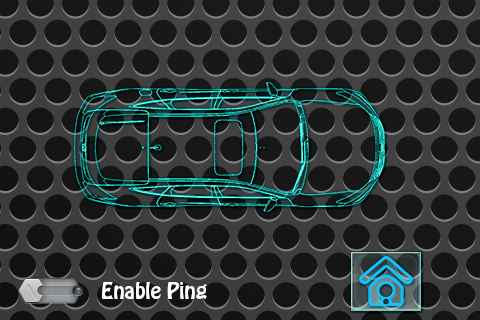
<style>
.page{position:relative;width:480px;height:320px}
.page>*{position:absolute;margin:0}
.t1{font:20px "HoboStd";color:#ffffff}
</style>
<div class="page">
<p class="t1" style="left:102px;top:282px;width:105px;height:17px">Enable Ping</p>
</div>
